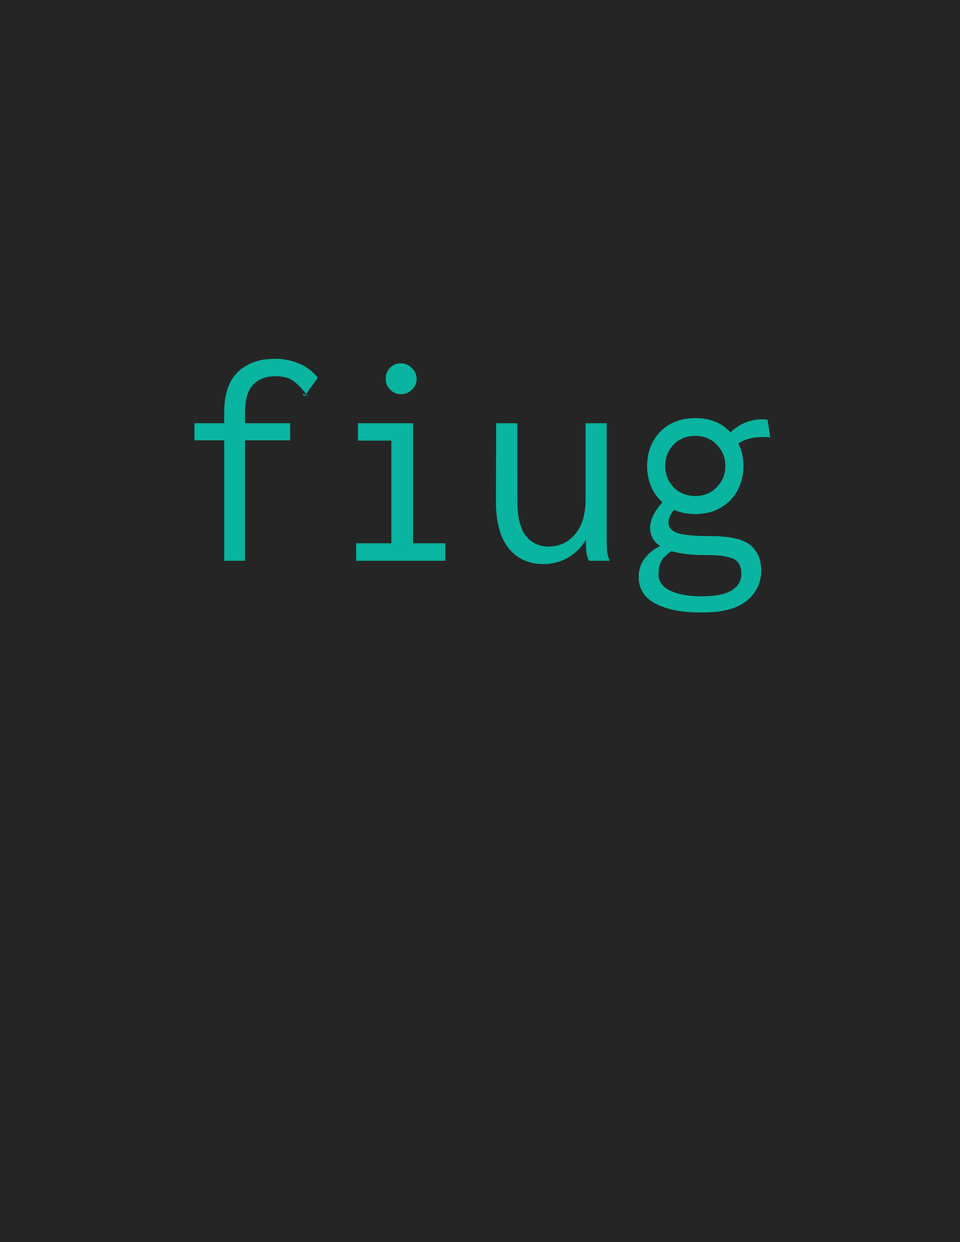
<style>
.page{position:relative;width:960px;height:1242px;background:#252525}
.page>*{position:absolute;margin:0}
.t1{font:301.1px "Inconsolata-Regular";color:#09b4a0}
</style>
<div class="page">
<p class="t1" style="left:194px;top:359px;width:576px;height:254px">fiug</p>
</div>
